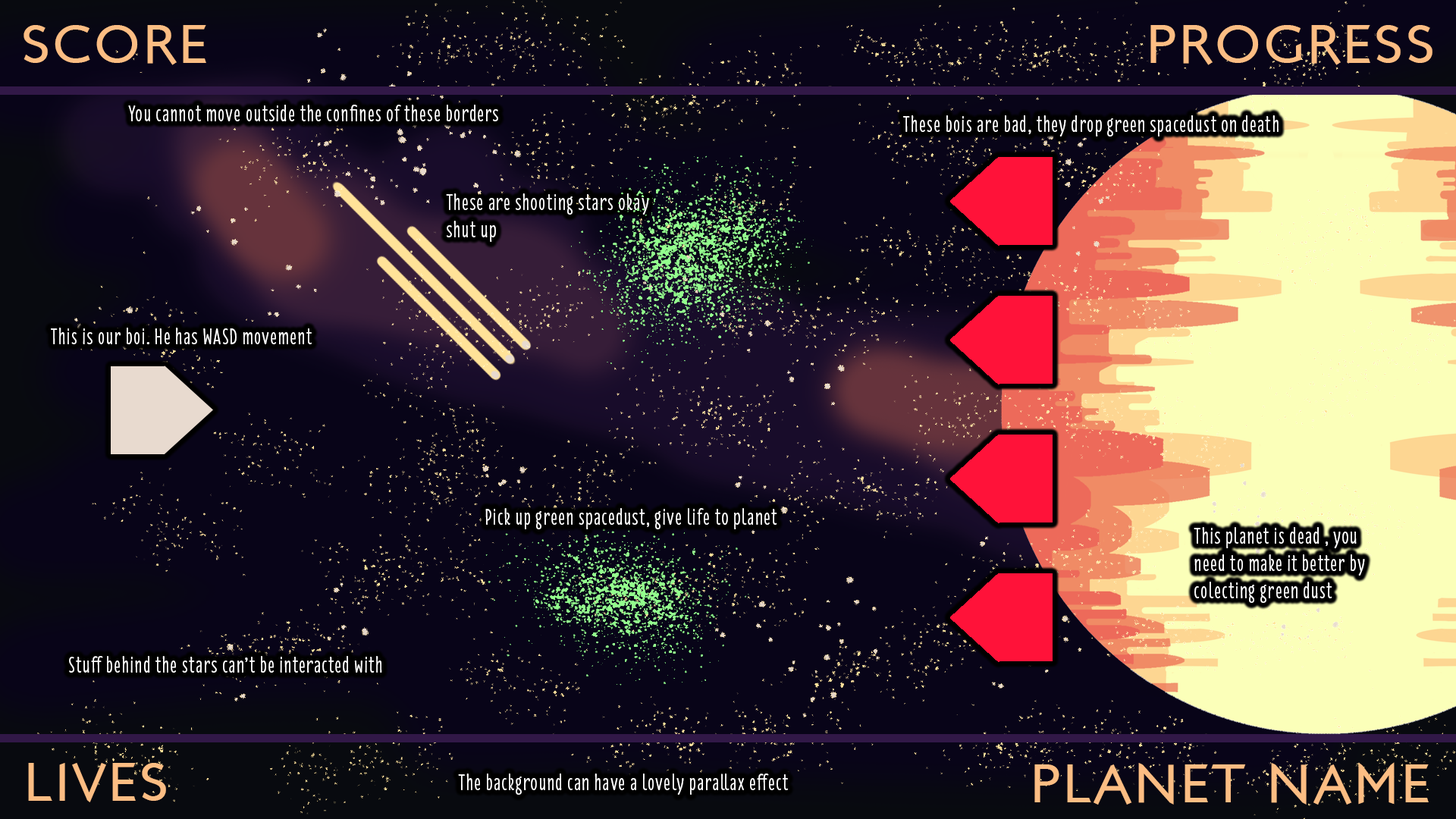
<style>
.page{position:relative;width:1456px;height:819px;background:#080418}
.page>*{position:absolute;margin:0}
.t1{font:54.6px "LondonBetween";letter-spacing:0.05em;color:#fcbd83}
.t2{font:22.7px "Florence-Regular";letter-spacing:0.05em;color:#ffffff}
</style>
<div class="page">
<p class="t1" style="left:24px;top:25px;width:182px;height:40px">SCORE</p>
<p class="t1" style="left:1150px;top:25px;width:282px;height:40px">PROGRESS</p>
<p class="t2" style="left:128px;top:105px;width:370px;height:16px">You cannot move outside the confines of these borders</p>
<p class="t2" style="left:903px;top:115px;width:376px;height:21px">These bois are bad, they drop green spacedust on death</p>
<p class="t2" style="left:446px;top:193px;width:203px;height:49px">These are shooting stars okay<br>shut up</p>
<p class="t2" style="left:51px;top:328px;width:261px;height:16px">This is our boi. He has WASD movement</p>
<p class="t2" style="left:485px;top:508px;width:292px;height:21px">Pick up green spacedust, give life to planet</p>
<p class="t2" style="left:1194px;top:527px;width:171px;height:76px">This planet is dead , you<br>need to make it better by<br>colecting green dust</p>
<p class="t2" style="left:69px;top:656px;width:313px;height:17px">Stuff behind the stars can’t be interacted with</p>
<p class="t1" style="left:28px;top:763px;width:138px;height:39px">LIVES</p>
<p class="t2" style="left:458px;top:773px;width:330px;height:22px">The background can have a lovely parallax effect</p>
<p class="t1" style="left:1034px;top:762px;width:395px;height:43px">PLANET NAME</p>
</div>
